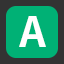
<style>
.page{position:relative;width:64px;height:64px;background:#00b175}
.page>*{position:absolute;margin:0}
.t1{font:41.7px "SourceHanSansCN-Bold";color:#ffffff}
</style>
<div class="page">
<p class="t1" style="left:19px;top:16px;width:27px;height:31px">A</p>
</div>
